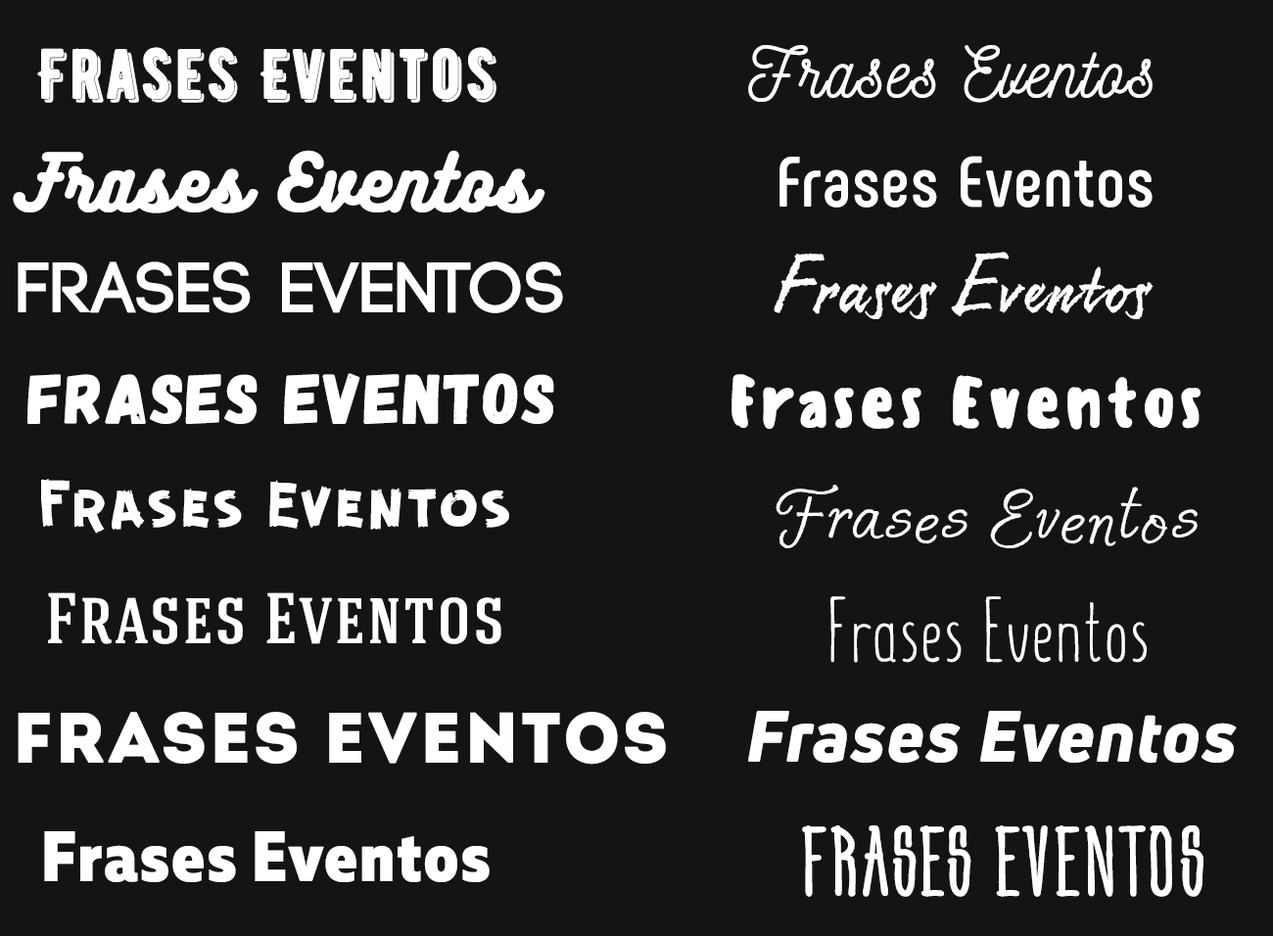
<style>
.page{position:relative;width:1273px;height:936px;background:#141414}
.page>*{position:absolute;margin:0}
.t1{font:70.5px "BERNIERShade-Regular";letter-spacing:0.005em;color:#ffffff;font-weight:bold}
.t2{font:70.5px "Nickainley-Normal";letter-spacing:0.005em;color:#ffffff;font-weight:bold}
.t3{font:70.5px "BukhariScript-Regular";letter-spacing:0.005em;color:#ffffff;font-weight:bold}
.t4{font:70.5px "Phenomena-Bold";letter-spacing:0.005em;color:#ffffff;font-weight:bold}
.t5{font:90.1px "Resphekt-Regular";letter-spacing:0.005em;color:#ffffff;font-weight:bold}
.t6{font:70.5px "Code-Bold";letter-spacing:0.005em;color:#ffffff;font-weight:bold}
.t7{font:70.5px "Gagalin-Regular";letter-spacing:0.005em;color:#ffffff;font-weight:bold}
.t8{font:70.5px "Sensei-Medium";letter-spacing:0.005em;color:#ffffff;font-weight:bold}
.t9{font:70.5px "GUERRILLA-Normal";letter-spacing:0.005em;color:#ffffff;font-weight:bold}
.t10{font:90.1px "Solena-Regular";letter-spacing:0.005em;color:#ffffff;font-weight:bold}
.t11{font:70.5px "HaginCapsMedium";letter-spacing:0.005em;color:#ffffff;font-weight:bold}
.t12{font:90.1px "SummerFont-Light";letter-spacing:0.005em;color:#ffffff;font-weight:bold}
.t13{font:70.5px "Intro";letter-spacing:0.005em;color:#ffffff;font-weight:bold}
.t14{font:70.5px "UniNeueHeavy-Italic";letter-spacing:0.005em;color:#ffffff;font-weight:bold}
.t15{font:70.5px "MullerNarrow-ExtraBold";letter-spacing:0.005em;color:#ffffff;font-weight:bold}
.t16{font:70.5px "Yarin-Bold";letter-spacing:0.005em;color:#ffffff;font-weight:bold}
</style>
<div class="page">
<p class="t1" style="left:37px;top:47px;width:460px;height:56px">Frases Eventos</p>
<p class="t2" style="left:748px;top:45px;width:405px;height:58px">Frases Eventos</p>
<p class="t3" style="left:13px;top:150px;width:533px;height:64px">Frases Eventos</p>
<p class="t4" style="left:780px;top:156px;width:373px;height:52px">Frases Eventos</p>
<p class="t5" style="left:774px;top:252px;width:380px;height:67px">Frases Eventos</p>
<p class="t6" style="left:18px;top:262px;width:545px;height:51px">Frases Eventos</p>
<p class="t7" style="left:27px;top:373px;width:527px;height:51px">Frases Eventos</p>
<p class="t8" style="left:732px;top:374px;width:469px;height:56px">Frases Eventos</p>
<p class="t9" style="left:41px;top:479px;width:468px;height:55px">Frases Eventos</p>
<p class="t10" style="left:776px;top:485px;width:422px;height:64px">Frases Eventos</p>
<p class="t11" style="left:48px;top:593px;width:454px;height:52px">Frases Eventos</p>
<p class="t12" style="left:831px;top:597px;width:316px;height:66px">Frases Eventos</p>
<p class="t13" style="left:18px;top:712px;width:648px;height:53px">Frases Eventos</p>
<p class="t14" style="left:748px;top:711px;width:489px;height:52px">Frases Eventos</p>
<p class="t15" style="left:44px;top:832px;width:446px;height:51px">Frases Eventos</p>
<p class="t16" style="left:802px;top:826px;width:402px;height:71px">Frases Eventos</p>
</div>
